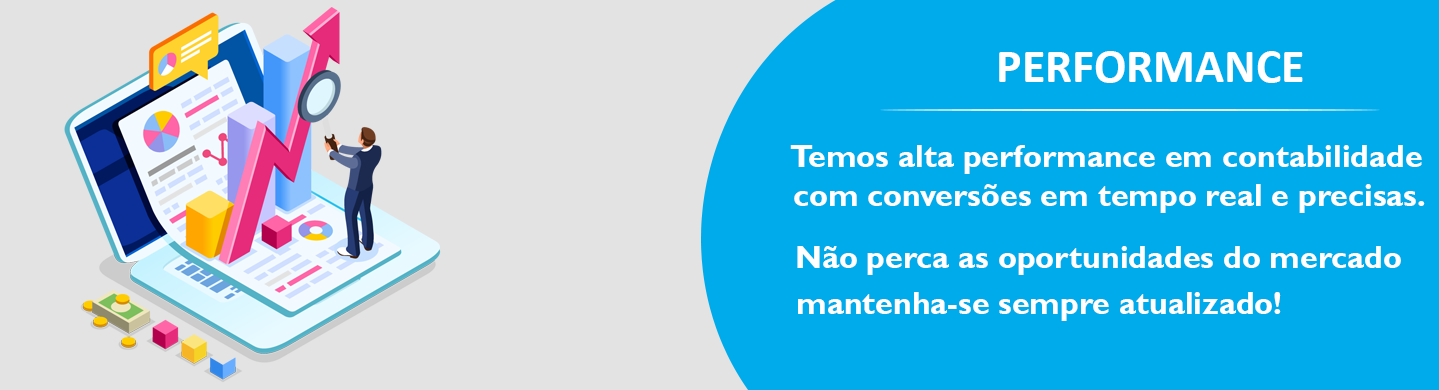
<style>
.page{position:relative;width:1439px;height:390px;background:#00abeb}
.page>*{position:absolute;margin:0}
.t1{font:48px "Calibri-Bold";color:#ffffff}
.t2{font:32px "GillSansMT-Bold";color:#ffffff}
</style>
<div class="page">
<p class="t1" style="left:999px;top:51px;width:304px;height:32px">PERFORMANCE</p>
<p class="t2" style="left:790px;top:145px;width:632px;height:29px">Temos alta performance em contabilidade</p>
<p class="t2" style="left:794px;top:184px;width:631px;height:29px">com conversões em tempo real e precisas.</p>
<p class="t2" style="left:797px;top:246px;width:604px;height:29px">Não perca as oportunidades do mercado</p>
<p class="t2" style="left:798px;top:292px;width:483px;height:29px">mantenha-se sempre atualizado!</p>
</div>
